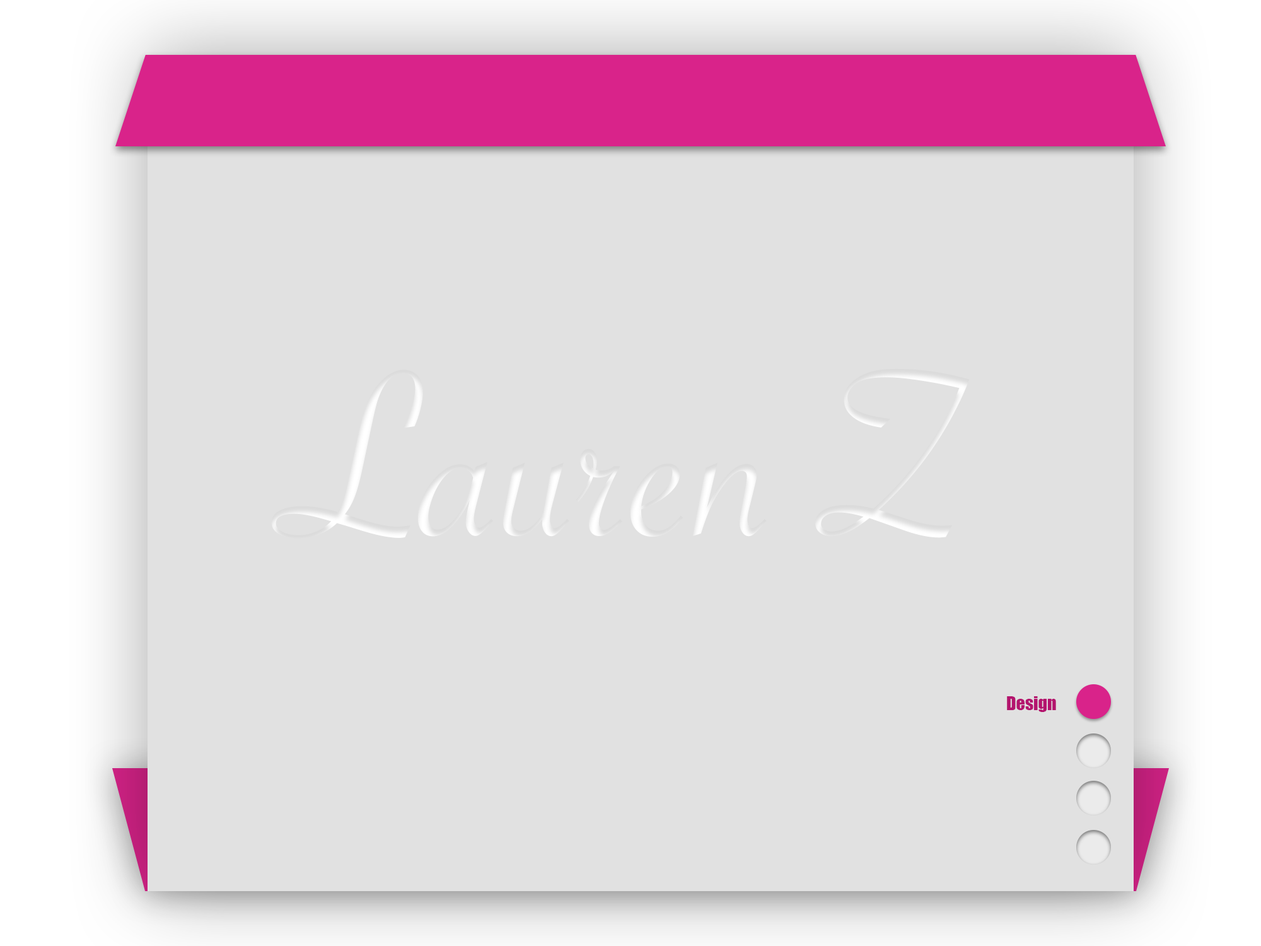
<style>
.page{position:relative;width:1261px;height:946px;background:#e1e1e1}
.page>*{position:absolute;margin:0}
.t1{font:252.2px "SavoyeLetPlain";color:#ffffff}
.t2{font:17.7px "Impact";color:#b4146e}
</style>
<div class="page">
<p class="t1" style="left:271px;top:368px;width:699px;height:170px">Lauren Z</p>
<p class="t2" style="left:1007px;top:696px;width:49px;height:16px">Design</p>
</div>
